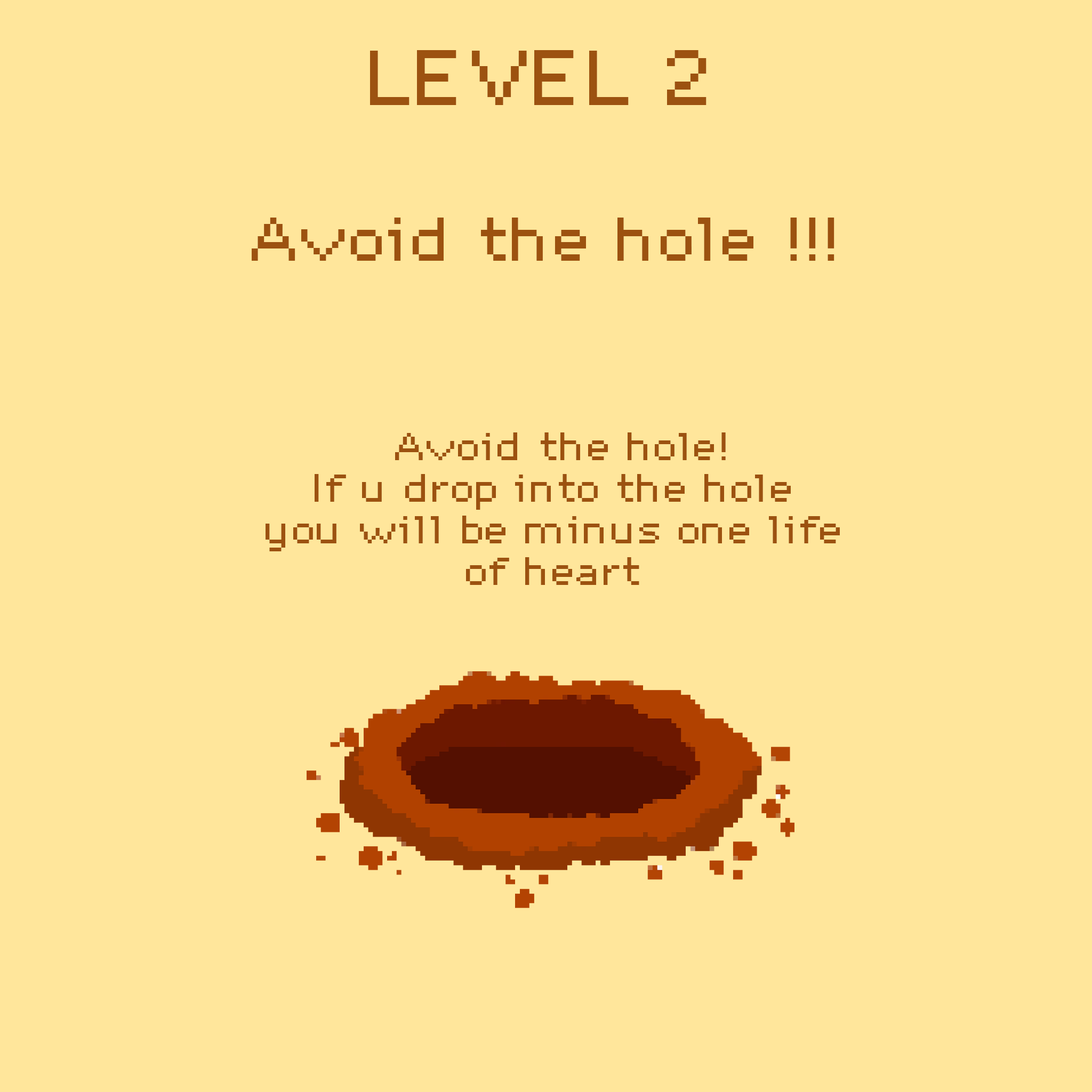
<style>
.page{position:relative;width:1092px;height:1092px;background:#ffe69b}
.page>*{position:absolute;margin:0}
.t1{font:68.8px "DePixel-Breit";color:#9c5210}
.t2{font:54.6px "DePixel-Breit";color:#9c5210}
.t3{font:34.6px "DePixel-Breit";color:#9c5210}
</style>
<div class="page">
<p class="t1" style="left:370px;top:50px;width:336px;height:55px">LEVEL 2</p>
<p class="t2" style="left:252px;top:218px;width:582px;height:43px">Avoid the hole !!!</p>
<p class="t3" style="left:266px;top:432px;width:574px;height:153px;text-align:center">Avoid the hole!<br>If u drop into the hole <br>you will be minus one life <br>of heart</p>
</div>
